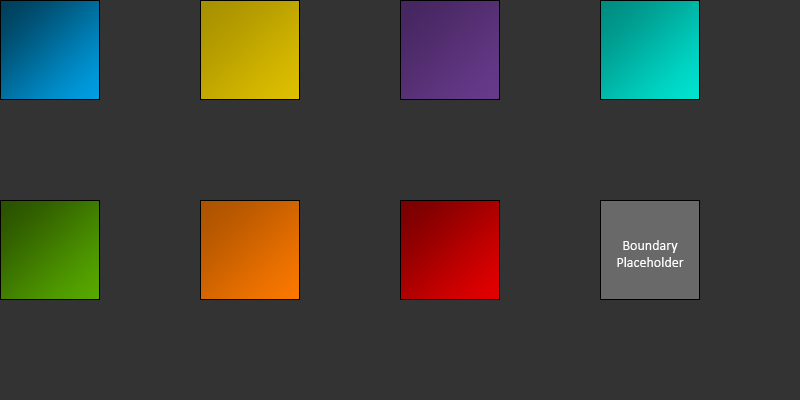
<style>
.page{position:relative;width:800px;height:400px;background:#333333}
.page>*{position:absolute;margin:0}
.t1{font:14px "Calibri";color:#ffffff}
</style>
<div class="page">
<p class="t1" style="left:617px;top:240px;width:67px;height:27px;text-align:center">Boundary<br>Placeholder</p>
</div>
